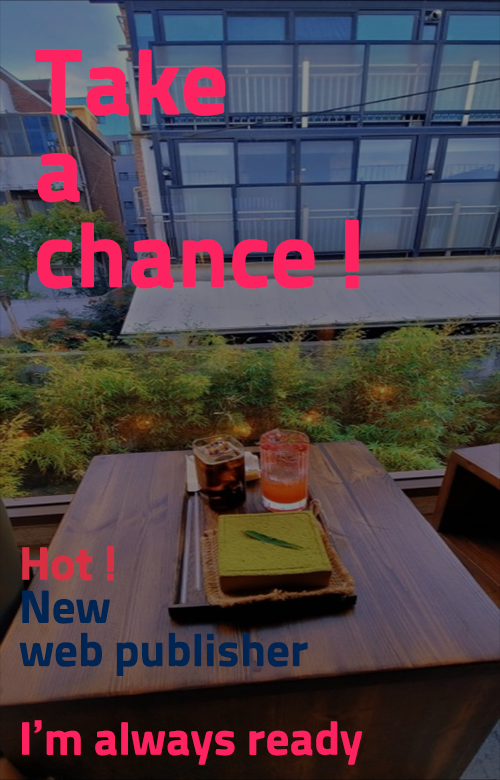
<style>
.page{position:relative;width:500px;height:780px}
.page>*{position:absolute;margin:0}
.t1{font:72px "RecipekoreaM";color:#fd2360}
.t2{font:36px "RecipekoreaM";color:#fd2360}
</style>
<div class="page">
<p class="t1" style="left:35px;top:49px;width:324px;height:240px">Take <br>a <br>chance !</p>
<p class="t2" style="left:22px;top:720px;width:341px;height:45px">I’m always ready</p>
</div>
